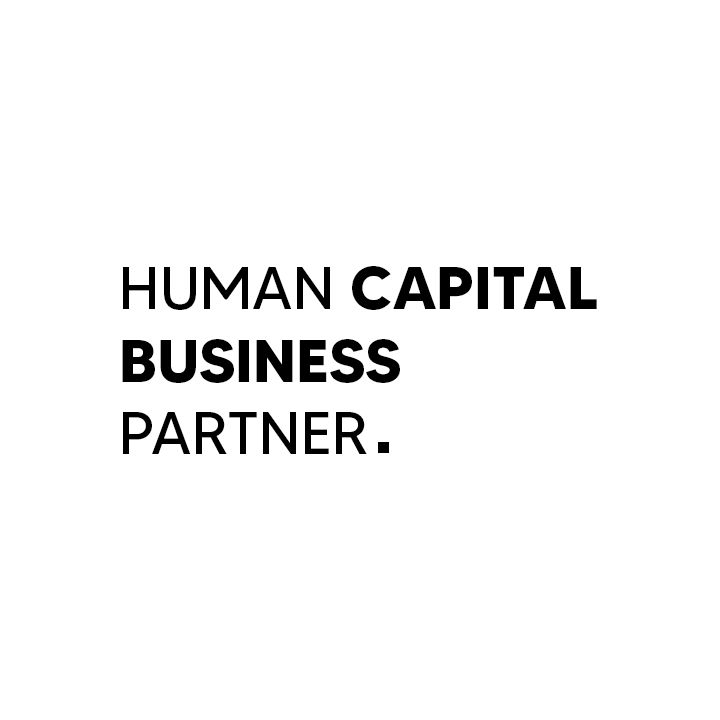
<style>
.page{position:relative;width:720px;height:720px;background:#ffffff}
.page>*{position:absolute;margin:0}
.t1{font:60.4px "MADETOMMY-Bold";color:#000000}
.t2{font:60.4px "MADETOMMY";color:#000000}
</style>
<div class="page">
<p class="t1" style="left:122px;top:266px;width:475px;height:188px"><span class="t2">HUMAN </span>CAPITAL<br>BUSINESS<br><span class="t2">PARTNER</span></p>
</div>
